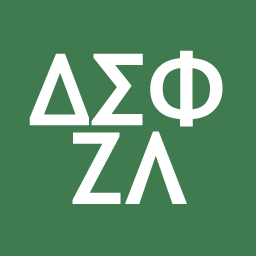
<style>
.page{position:relative;width:256px;height:256px;background:#3f7b4f}
.page>*{position:absolute;margin:0}
.t1{font:100px "TrebuchetMS-Bold";color:#ffffff}
</style>
<div class="page">
<p class="t1" style="left:29px;top:50px;width:194px;height:77px">ΔΣΦ</p>
<p class="t1" style="left:72px;top:131px;width:115px;height:73px">ΖΛ</p>
</div>
